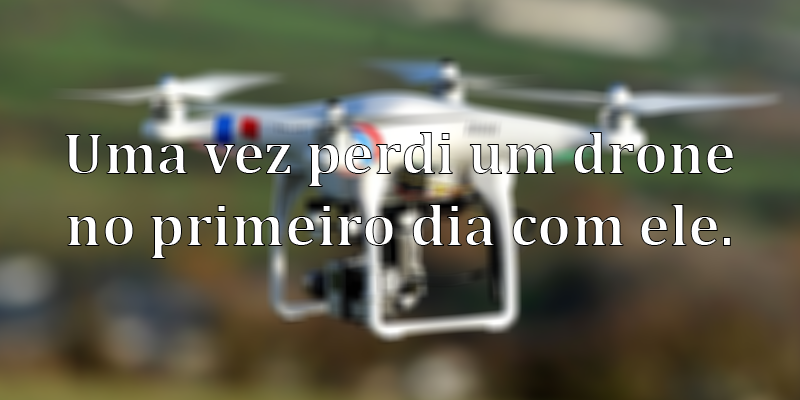
<style>
.page{position:relative;width:800px;height:400px}
.page>*{position:absolute;margin:0}
.t1{font:60px "Cambria-Bold";color:#ffffff}
</style>
<div class="page">
<p class="t1" style="left:65px;top:132px;width:669px;height:127px;text-align:center">Uma vez perdi um drone no primeiro dia com ele.</p>
</div>
